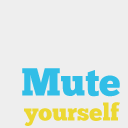
<style>
.page{position:relative;width:128px;height:128px;background:#eeeeee}
.page>*{position:absolute;margin:0}
.t1{font:39px "ChunkFive";color:#31bee7}
.t2{font:24px "ChunkFive";color:#ecd833}
</style>
<div class="page">
<p class="t1" style="left:22px;top:68px;width:98px;height:29px">Mute</p>
<p class="t2" style="left:24px;top:102px;width:96px;height:24px">yourself</p>
</div>
